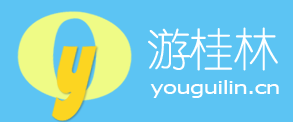
<style>
.page{position:relative;width:293px;height:122px;background:#5cc4f3}
.page>*{position:absolute;margin:0}
.t1{font:45.8px "YouYuan";letter-spacing:-0.05em;color:#ffffff}
.t2{font:17.6px "Verdana";letter-spacing:-0.05em;color:#ffffff;scale:1.34 1}
</style>
<div class="page">
<p class="t1" style="left:148px;top:27px;width:130px;height:44px">游桂林</p>
<p class="t2" style="left:150px;top:80px;width:129px;height:18px">youguilin.cn</p>
</div>
